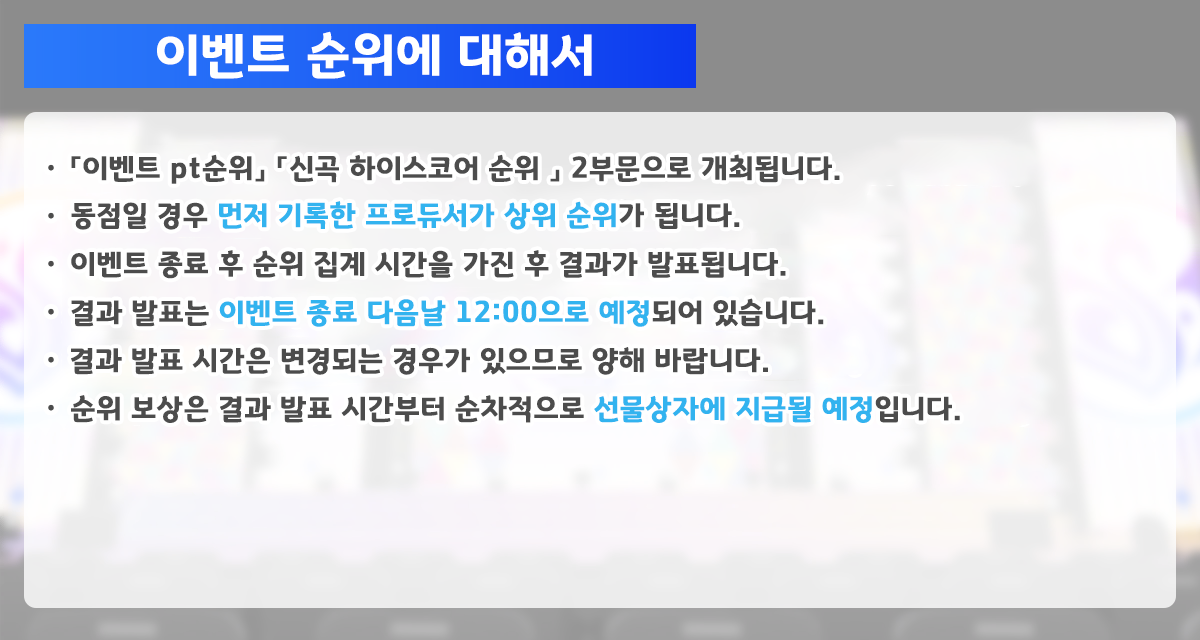
<style>
.page{position:relative;width:1200px;height:640px}
.page>*{position:absolute;margin:0}
.t1{font:50.7px "GyeonggiTitleB";letter-spacing:0.03em;color:#ffffff}
.t2{font:29.3px "GyeonggiTitleB";letter-spacing:0.03em;color:#4c4c4c}
.t3{font:29.3px "GyeonggiTitleB";letter-spacing:0.03em;color:#32b3ef}
</style>
<div class="page">
<p class="t1" style="left:157px;top:31px;width:435px;height:48px">이벤트 순위에 대해서</p>
<p class="t2" style="left:71px;top:154px;width:769px;height:30px">「이벤트 pt순위」 「신곡 하이스코어 순위 」 2부문으로 개최됩니다.</p>
<p class="t3" style="left:71px;top:201px;width:669px;height:29px"><span class="t2">동점일 경우 </span>먼저 기록한 프로듀서가 상위 순위<span class="t2">가 됩니다.</span></p>
<p class="t2" style="left:71px;top:250px;width:715px;height:29px">이벤트 종료 후 순위 집계 시간을 가진 후 결과가 발표됩니다.</p>
<p class="t3" style="left:71px;top:298px;width:753px;height:29px"><span class="t2">결과 발표는 </span>이벤트 종료 다음날 12:00으로 예정<span class="t2">되어 있습니다.</span></p>
<p class="t2" style="left:71px;top:347px;width:697px;height:28px">결과 발표 시간은 변경되는 경우가 있으므로 양해 바랍니다.</p>
<p class="t2" style="left:71px;top:395px;width:889px;height:28px">순위 보상은 결과 발표 시간부터 순차적으로 <span class="t3">선물상자에 지급될 예정</span>입니다.</p>
</div>
